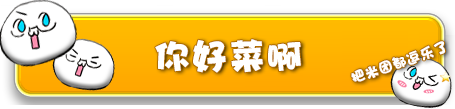
<style>
.page{position:relative;width:455px;height:109px;background:#ffffff}
.page>*{position:absolute;margin:0}
.t1{font:36px "DFPHaiBaoW12";letter-spacing:0.04em;color:#ffffff;text-transform:uppercase}
.t2{font:14px "DFPHaiBaoW12";letter-spacing:0.04em;color:#ffffff;text-transform:uppercase}
</style>
<div class="page">
<p class="t1" style="left:155px;top:39px;width:146px;height:34px">你好菜啊</p>
<p class="t2" style="left:351px;top:41px;width:95px;height:41px;rotate:-19deg">把米团都逗乐了</p>
</div>
